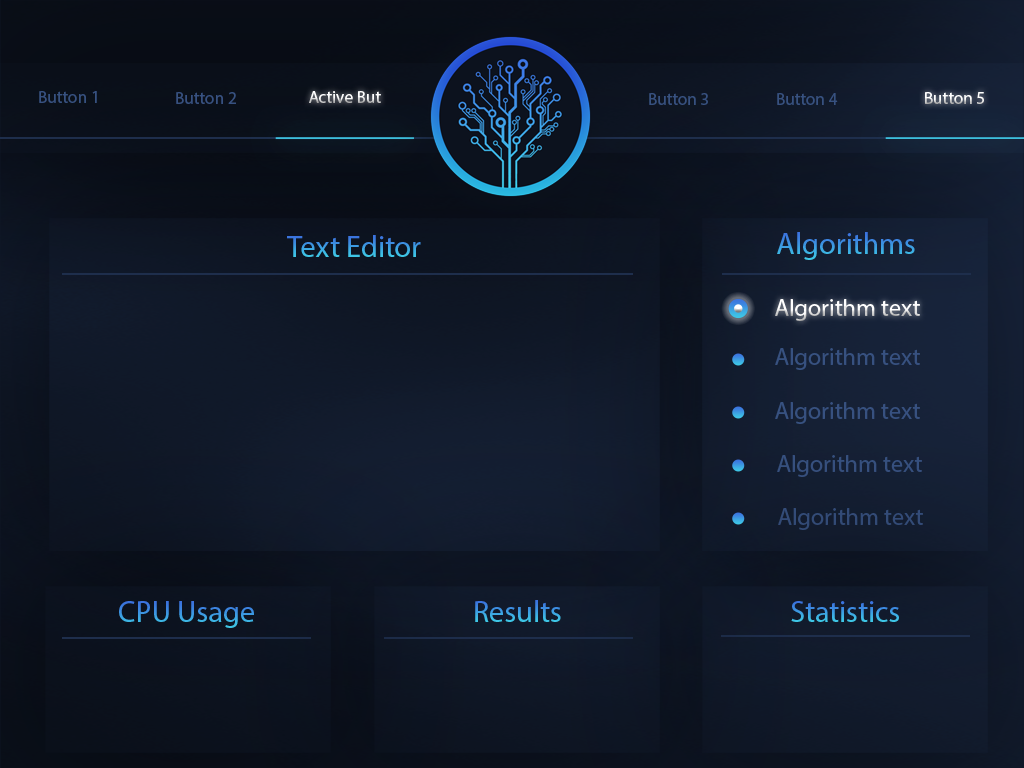
<style>
.page{position:relative;width:1024px;height:768px}
.page>*{position:absolute;margin:0}
.t1{font:17.2px "MyriadPro-Regular";color:#375180}
.t2{font:17.2px "MyriadPro-Regular"}
.t3{font:17.2px "MyriadPro-Regular";color:#ffffff}
.t4{font:30.1px "MyriadPro-Regular"}
.t5{font:24px "MyriadPro-Regular";color:#ffffff}
.t6{font:24px "MyriadPro-Regular";color:#375180}
</style>
<div class="page">
<p class="t1" style="left:39px;top:91px;width:58px;height:12px">Button 1</p>
<p class="t1" style="left:176px;top:92px;width:60px;height:12px">Button 2</p>
<p class="t2" style="left:309px;top:91px;width:72px;height:12px">Active But</p>
<p class="t1" style="left:649px;top:93px;width:59px;height:12px">Button 3</p>
<p class="t1" style="left:777px;top:93px;width:61px;height:12px">Button 4</p>
<p class="t3" style="left:925px;top:92px;width:59px;height:12px">Button 5</p>
<p class="t4" style="left:777px;top:232px;width:138px;height:28px">Algorithms</p>
<p class="t4" style="left:287px;top:235px;width:134px;height:22px">Text Editor</p>
<p class="t5" style="left:775px;top:299px;width:145px;height:22px">Algorithm text</p>
<p class="t6" style="left:775px;top:348px;width:145px;height:22px">Algorithm text</p>
<p class="t6" style="left:775px;top:402px;width:145px;height:22px">Algorithm text</p>
<p class="t6" style="left:777px;top:455px;width:145px;height:22px">Algorithm text</p>
<p class="t6" style="left:778px;top:508px;width:145px;height:22px">Algorithm text</p>
<p class="t4" style="left:119px;top:601px;width:135px;height:27px">CPU Usage</p>
<p class="t4" style="left:475px;top:600px;width:86px;height:22px">Results</p>
<p class="t4" style="left:791px;top:601px;width:108px;height:21px">Statistics</p>
</div>
